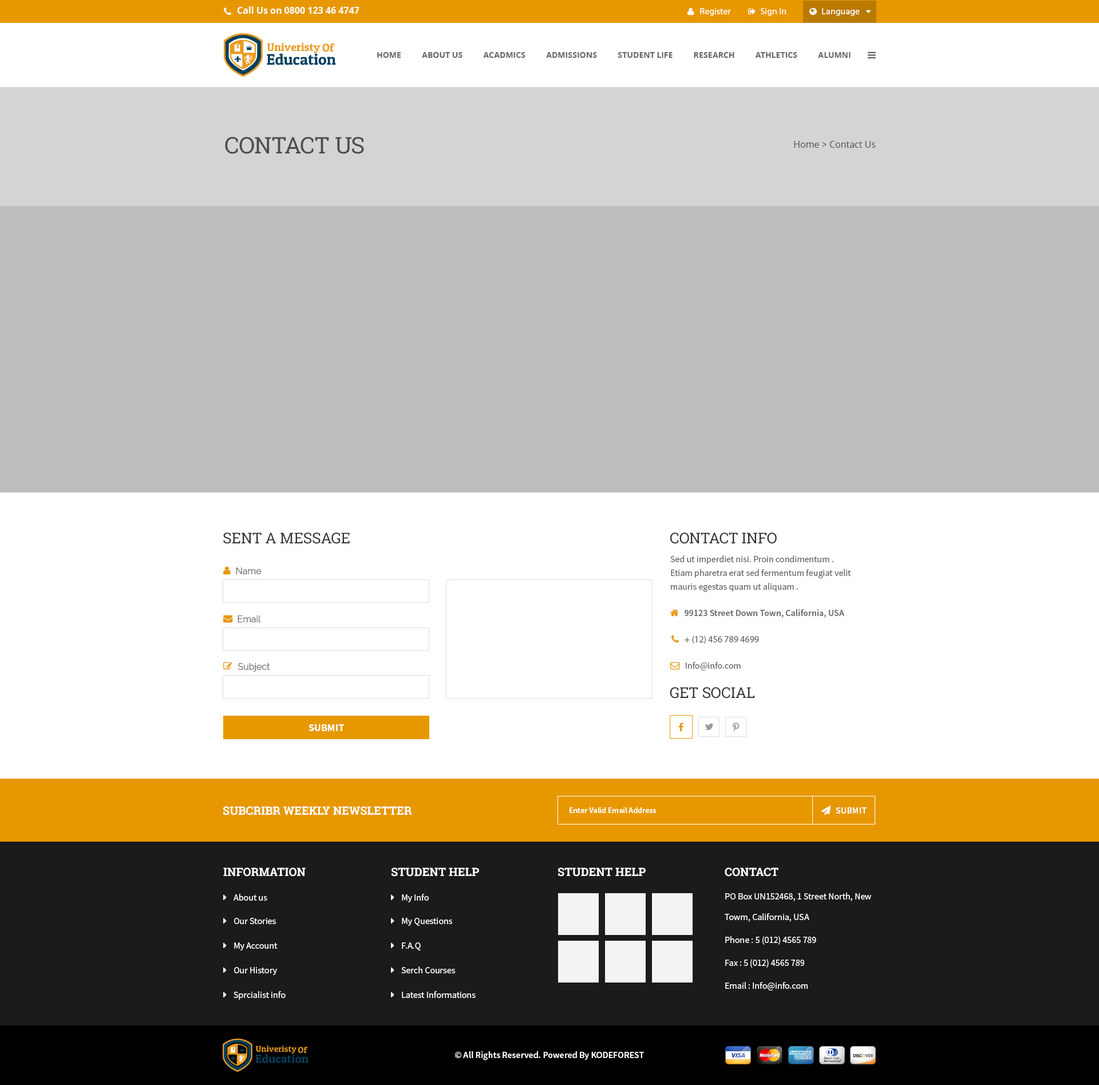
<style>
.page{position:relative;width:1099px;height:1085px;background:#ffffff}
.page>*{position:absolute;margin:0}
.t1{font:9.2px "OpenSans-Bold";color:#ffffff}
.t2{font:9.2px "MyriadPro-Regular";color:#ffffff}
.t3{font:8px "OpenSans-Bold";color:#666666;text-transform:uppercase}
.t4{font:22.9px "RobotoSlab-Regular";color:#4d4d4d;text-transform:uppercase}
.t5{font:9.2px "OpenSans";color:#4d4d4d}
.t6{font:14.9px "RobotoSlab-Regular";color:#333333;text-transform:uppercase}
.t7{font:9.2px/13.7px "SourceSansPro-Regular";color:#666666}
.t8{font:9.2px "Raleway-Regular";color:#666666}
.t9{font:9.2px "SourceSansPro-Semibold";color:#666666}
.t10{font:9.2px "MyriadPro-Regular";color:#666666}
.t11{font:9.2px "SourceSansPro-Regular";color:#666666}
.t12{font:10.3px "SourceSansPro-Bold";color:#ffffff;text-transform:uppercase}
.t13{font:11.4px "RobotoSlab-Bold";color:#ffffff;text-transform:uppercase}
.t14{font:8px "SourceSansPro-Semibold";color:#ffffff}
.t15{font:9.2px "SourceSansPro-Semibold";color:#ffffff}
.t16{font:9.2px "SourceSansPro-Regular";color:#ffffff}
.t17{font:9.2px/20.6px "SourceSansPro-Regular";color:#ffffff}
</style>
<div class="page">
<p class="t1" style="left:238px;top:6px;width:122px;height:8px">Call Us on 0800 123 46 4747</p>
<p class="t2" style="left:700px;top:8px;width:31px;height:8px">Register</p>
<p class="t2" style="left:761px;top:8px;width:25px;height:8px">Sign In</p>
<p class="t2" style="left:822px;top:8px;width:38px;height:8px">Language</p>
<p class="t3" style="left:377px;top:52px;width:474px;height:6px">Home          About Us          ACADMICS          ADMISSIONS          STUDENT LIFE          RESEARCH          ATHLETICS          ALUMNI</p>
<p class="t4" style="left:225px;top:137px;width:139px;height:17px">Contact Us</p>
<p class="t5" style="left:794px;top:141px;width:82px;height:7px">Home &gt; Contact Us</p>
<p class="t6" style="left:223px;top:532px;width:127px;height:12px">Sent A Message</p>
<p class="t6" style="left:670px;top:532px;width:107px;height:12px">Contact info</p>
<p class="t7" style="left:670px;top:555px;width:181px;height:37px">Sed ut imperdiet nisi. Proin condimentum .<br>Etiam pharetra erat sed fermentum feugiat velit mauris egestas quam ut aliquam .</p>
<p class="t8" style="left:236px;top:567px;width:26px;height:7px">Name</p>
<p class="t8" style="left:238px;top:615px;width:23px;height:7px">Email</p>
<p class="t9" style="left:685px;top:609px;width:159px;height:9px">99123 Street Down Town, California, USA</p>
<p class="t10" style="left:685px;top:635px;width:74px;height:8px">+ (12) 456 789 4699</p>
<p class="t8" style="left:238px;top:663px;width:32px;height:9px">Subject</p>
<p class="t11" style="left:686px;top:662px;width:55px;height:8px">Info@info.com</p>
<p class="t6" style="left:670px;top:687px;width:85px;height:11px">Get Social</p>
<p class="t12" style="left:309px;top:724px;width:35px;height:7px">Submit</p>
<p class="t13" style="left:223px;top:806px;width:189px;height:9px">subcribr weekly newsletter</p>
<p class="t14" style="left:570px;top:807px;width:86px;height:6px">Enter Valid Email Address</p>
<p class="t15" style="left:836px;top:807px;width:31px;height:6px">SUBMIT</p>
<p class="t13" style="left:223px;top:867px;width:83px;height:9px">INFORMATION</p>
<p class="t13" style="left:392px;top:867px;width:87px;height:9px">student help</p>
<p class="t13" style="left:558px;top:867px;width:88px;height:9px">student help</p>
<p class="t13" style="left:725px;top:867px;width:54px;height:9px">Contact</p>
<p class="t16" style="left:234px;top:894px;width:33px;height:7px">About us</p>
<p class="t16" style="left:402px;top:894px;width:27px;height:8px">My Info</p>
<p class="t17" style="left:725px;top:892px;width:146px;height:30px;text-align:right">PO Box UN152468, 1 Street North, New Towm, California, USA</p>
<p class="t16" style="left:234px;top:918px;width:42px;height:6px">Our Stories</p>
<p class="t16" style="left:402px;top:918px;width:50px;height:8px">My Questions</p>
<p class="t16" style="left:725px;top:936px;width:91px;height:9px">Phone : 5 (012) 4565 789</p>
<p class="t16" style="left:234px;top:942px;width:44px;height:8px">My Account</p>
<p class="t16" style="left:402px;top:942px;width:19px;height:8px">F.A.Q</p>
<p class="t16" style="left:725px;top:959px;width:79px;height:8px">Fax : 5 (012) 4565 789</p>
<p class="t16" style="left:234px;top:967px;width:43px;height:8px">Our History</p>
<p class="t16" style="left:401px;top:966px;width:54px;height:7px">Serch Courses</p>
<p class="t16" style="left:725px;top:982px;width:83px;height:8px">Email : Info@info.com</p>
<p class="t16" style="left:234px;top:991px;width:52px;height:9px">Sprcialist info</p>
<p class="t16" style="left:402px;top:991px;width:74px;height:7px">Latest Informations</p>
<p class="t15" style="left:455px;top:1051px;width:189px;height:9px">© All Rights Reserved. Powered By KODEFOREST</p>
</div>
